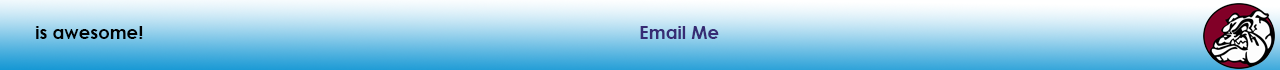
<style>
.page{position:relative;width:1280px;height:70px}
.page>*{position:absolute;margin:0}
.t1{font:18px "CenturyGothic-Bold";color:#000000}
.t2{font:14px "CenturyGothic-Bold";color:#000000}
.t3{font:18px "CenturyGothic-Bold";color:#372b74}
</style>
<div class="page">
<p class="t1" style="left:35px;top:26px;width:684px;height:13px"><span class="t2">    </span>is awesome!              <span class="t3">Email Me</span></p>
</div>
